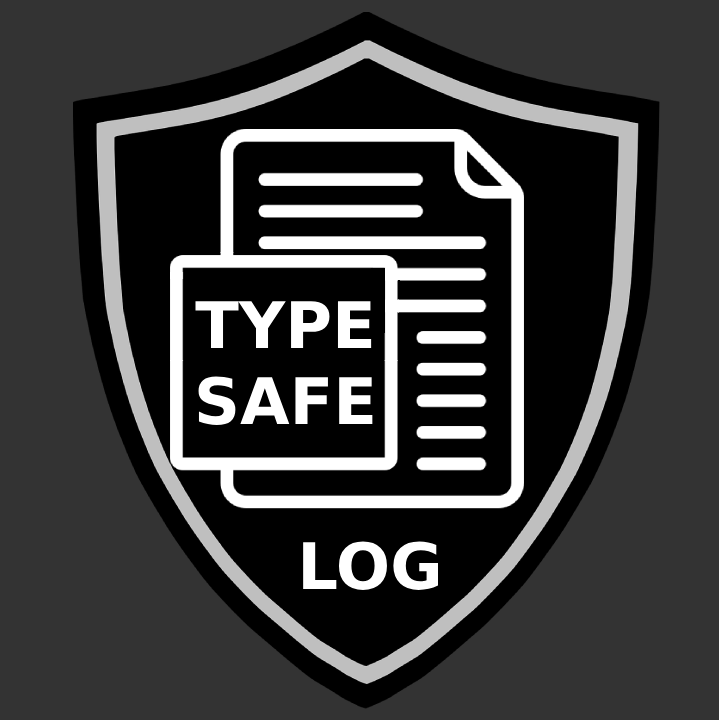
<style>
.page{position:relative;width:719px;height:720px;background:#333333}
.page>*{position:absolute;margin:0}
.t1{font:64px "DejaVuSans-Bold";color:#ffffff}
</style>
<div class="page">
<p class="t1" style="left:195px;top:301px;width:178px;height:124px;text-align:center">TYPE<br>SAFE</p>
<p class="t1" style="left:303px;top:541px;width:135px;height:49px">LOG</p>
</div>
